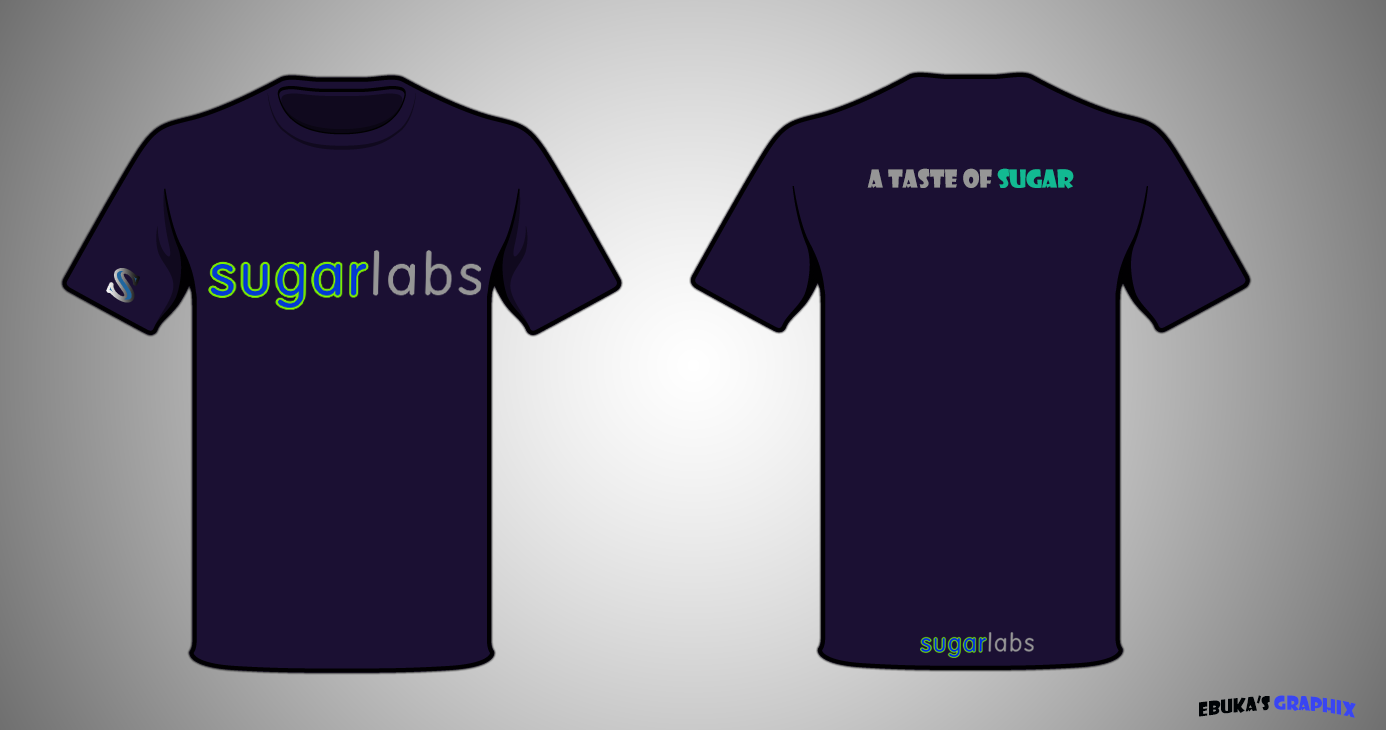
<style>
.page{position:relative;width:1386px;height:730px;background:#1b1033}
.page>*{position:absolute;margin:0}
.t1{font:24px "ShowcardGothic-Reg";color:#969696}
.t2{font:36px "ShowcardGothic-Reg";color:#020202}
.t3{font:24px "ShowcardGothic-Reg";color:#12b992}
.t4{font:38.3px "PerpetuaTitlingMT-Bold";scale:1.49 1}
.t5{font:18px "ShowcardGothic-Reg";color:#000306}
.t6{font:24px "ShowcardGothic-Reg";color:#120003}
.t7{font:18px "ShowcardGothic-Reg";color:#3945f2}
</style>
<div class="page">
<p class="t1" style="left:867px;top:168px;width:207px;height:21px"><span class="t2">                                </span>A taste of <span class="t3">sugar</span></p>
<p class="t4" style="left:107px;top:269px;width:32px;height:32px;rotate:33deg">S</p>
<p class="t5" style="left:1199px;top:695px;width:157px;height:23px"><span class="t6">     </span>EBUKA’S <span class="t7">GRAPHIX</span></p>
</div>
